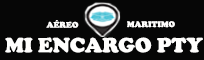
<style>
.page{position:relative;width:204px;height:60px;background:#060606}
.page>*{position:absolute;margin:0}
.t1{font:8.5px "CooperBlack";color:#fffefd}
.t2{font:21.2px "CooperBlack";color:#fffefd}
</style>
<div class="page">
<p class="t1" style="left:46px;top:20px;width:33px;height:8px">AÉREO</p>
<p class="t1" style="left:127px;top:21px;width:48px;height:7px">MARITIMO</p>
<p class="t2" style="left:5px;top:37px;width:198px;height:16px">MI ENCARGO PTY</p>
</div>
